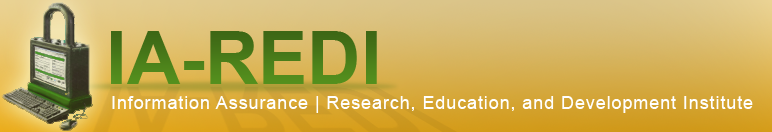
<style>
.page{position:relative;width:772px;height:132px}
.page>*{position:absolute;margin:0}
.t1{font:74px "Arial-BoldMT";color:#497c19}
.t2{font:18px "ArialMT";letter-spacing:0.05em;color:#ffffff}
</style>
<div class="page">
<p class="t1" style="left:111px;top:31px;width:266px;height:53px">IA-REDI</p>
<p class="t2" style="left:112px;top:96px;width:641px;height:17px">Information Assurance | Research, Education, and Development Institute</p>
</div>
